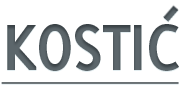
<style>
.page{position:relative;width:183px;height:89px;background:#ffffff}
.page>*{position:absolute;margin:0}
.t1{font:72px "Delicious-Bold";letter-spacing:-0.025em;color:#596267;text-decoration:underline}
</style>
<div class="page">
<p class="t1" style="left:1px;top:24px;width:178px;height:60px">KOSTIC</p>
</div>
